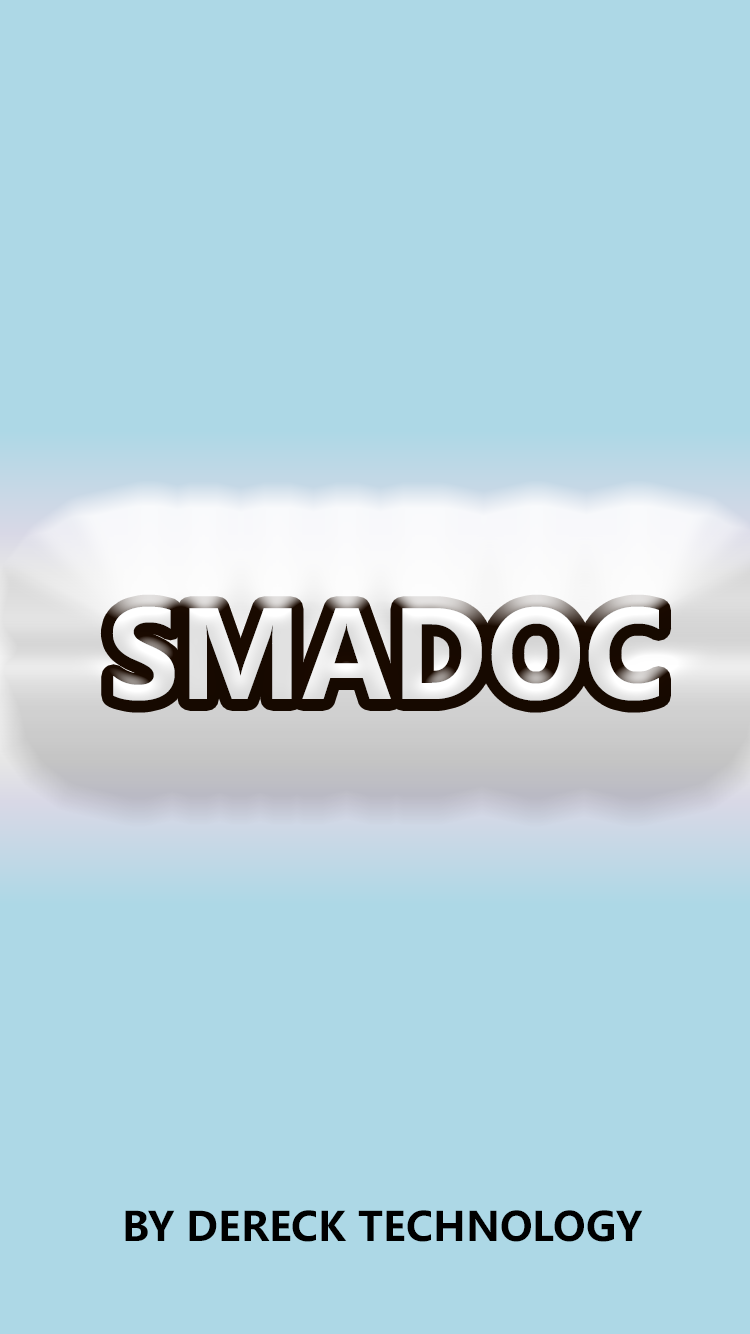
<style>
.page{position:relative;width:750px;height:1334px;background:#add8e6}
.page>*{position:absolute;margin:0}
.t1{font:120px "MicrosoftYaHei-Bold";color:#e9e9e9}
.t2{font:40px "MicrosoftYaHei-Bold";color:#000000}
</style>
<div class="page">
<p class="t1" style="left:112px;top:606px;width:548px;height:95px">SMADOC</p>
<p class="t2" style="left:125px;top:1210px;width:518px;height:32px">BY DERECK TECHNOLOGY</p>
</div>
